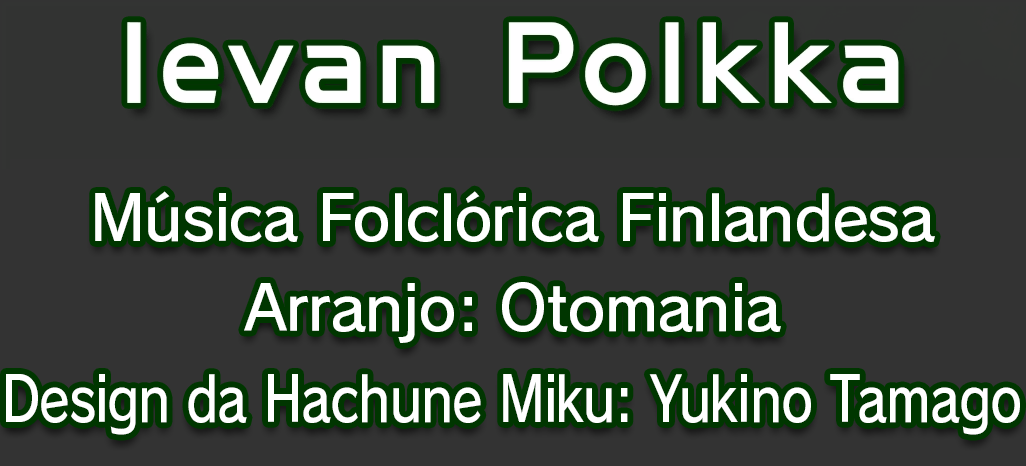
<style>
.page{position:relative;width:1026px;height:466px;background:#333333}
.page>*{position:absolute;margin:0}
.t1{font:61.3px/90.7px "RodinPro-DB";letter-spacing:-0.022em;color:#ffffff}
.t2{font:61.3px "RodinPro-DB";letter-spacing:-0.022em;color:#ffffff;scale:0.83 1}
</style>
<div class="page">
<p class="t1" style="left:95px;top:191px;width:840px;height:152px;text-align:center">Música Folclórica Finlandesa<br>Arranjo: Otomania</p>
<p class="t2" style="left:6px;top:374px;width:1014px;height:61px">Design da Hachune Miku: Yukino Tamago</p>
</div>
